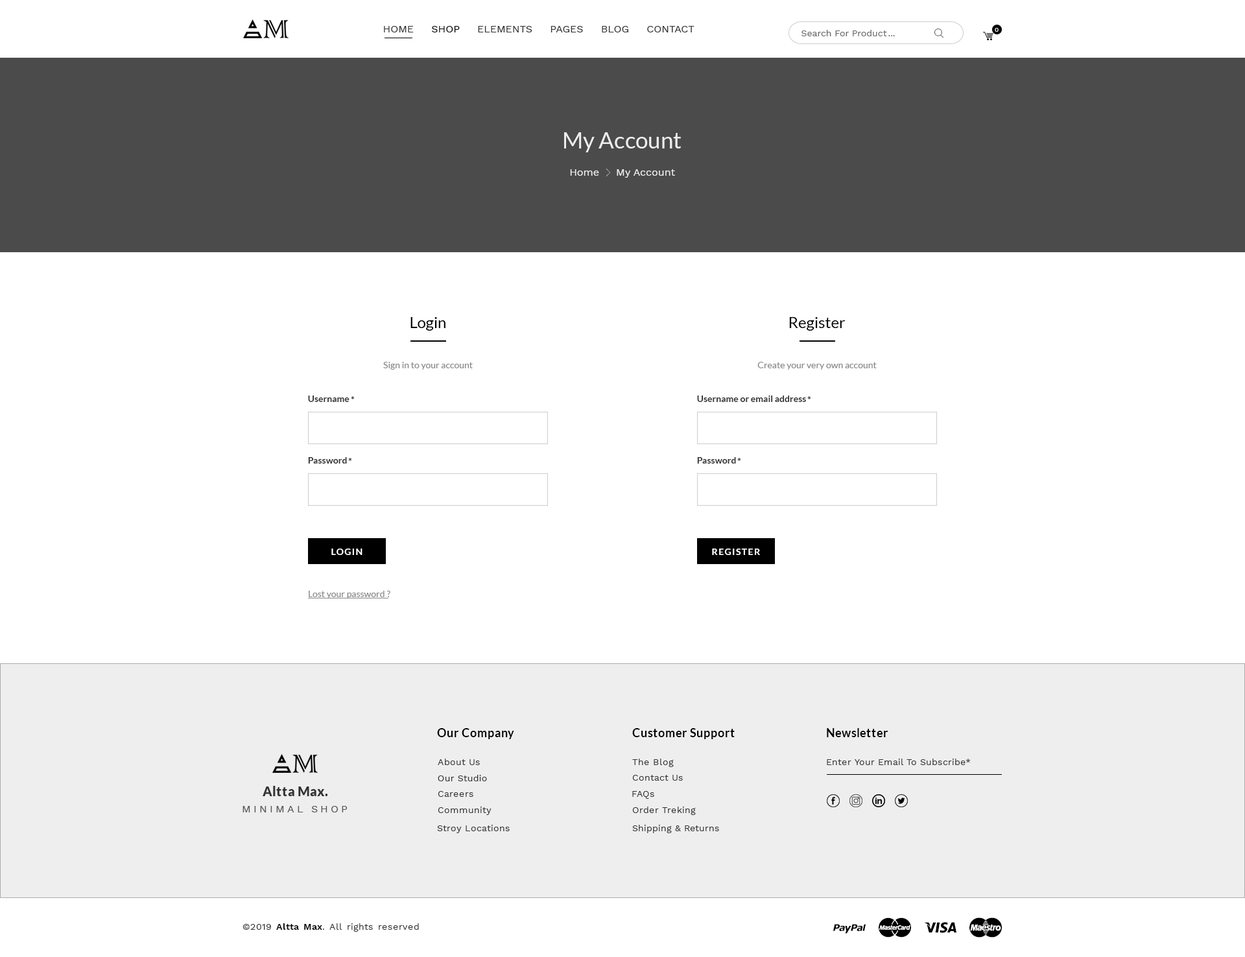
<style>
.page{position:relative;width:1245px;height:957px;background:#ffffff}
.page>*{position:absolute;margin:0}
.t1{font:10.4px "WorkSans-Regular";color:#333333}
.t2{font:10.4px "WorkSans-Regular";color:#000000}
.t3{font:9.1px "WorkSans-Regular";color:#666666}
.t4{font:6.5px "WorkSans-Regular";color:#ffffff}
.t5{font:22.7px "Lato-Regular";color:#eeeeee}
.t6{font:10.4px "WorkSans-Regular";color:#eeeeee}
.t7{font:15.6px "Lato-Regular";color:#000000}
.t8{font:9.1px "Lato-Regular";color:#888888}
.t9{font:9.1px "Lato-Bold";color:#333333}
.t10{font:9.1px "Lato-Bold";letter-spacing:0.1em;color:#ffffff}
.t11{font:11.7px "Lato-Bold";letter-spacing:0.03em;color:#000000}
.t12{font:9.1px "WorkSans-Regular";letter-spacing:0.03em;color:#333333}
.t13{font:13px "Lato-Black";letter-spacing:0.03em;color:#333333}
.t14{font:10.4px "WorkSans-Regular";letter-spacing:0.25em;color:#555555}
.t15{font:9.1px "WorkSans-SemiBold";letter-spacing:0.03em;color:#000000}
</style>
<div class="page">
<p class="t1" style="left:384px;top:26px;width:311px;height:6px">HOME     <span class="t2">SHOP</span>     ELEMENTS     PAGES     BLOG     CONTACT</p>
<p class="t3" style="left:802px;top:30px;width:85px;height:6px">Search For Product</p>
<p class="t4" style="left:995px;top:28px;width:4px;height:4px">0</p>
<p class="t3" style="left:889px;top:35px;width:6px;height:1px">...</p>
<p class="t5" style="left:564px;top:132px;width:118px;height:20px">My Account</p>
<p class="t6" style="left:570px;top:169px;width:29px;height:7px">Home</p>
<p class="t6" style="left:617px;top:169px;width:58px;height:9px">My Account</p>
<p class="t7" style="left:411px;top:317px;width:35px;height:14px">Login</p>
<p class="t7" style="left:789px;top:317px;width:57px;height:14px">Register</p>
<p class="t8" style="left:383px;top:362px;width:90px;height:8px">Sign in to your account</p>
<p class="t8" style="left:758px;top:362px;width:119px;height:8px">Create your very own account</p>
<p class="t9" style="left:308px;top:396px;width:42px;height:6px">Username</p>
<p class="t9" style="left:351px;top:396px;width:3px;height:4px">*</p>
<p class="t9" style="left:697px;top:396px;width:109px;height:6px">Username or email address</p>
<p class="t9" style="left:808px;top:396px;width:3px;height:4px">*</p>
<p class="t9" style="left:308px;top:457px;width:39px;height:7px">Password</p>
<p class="t9" style="left:348px;top:458px;width:4px;height:3px">*</p>
<p class="t9" style="left:697px;top:457px;width:39px;height:7px">Password</p>
<p class="t9" style="left:738px;top:458px;width:3px;height:3px">*</p>
<p class="t10" style="left:331px;top:549px;width:32px;height:6px">LOGIN</p>
<p class="t10" style="left:712px;top:549px;width:48px;height:6px">REGISTER</p>
<p class="t8" style="left:309px;top:591px;width:76px;height:8px">Lost your password</p>
<p class="t8" style="left:387px;top:591px;width:3px;height:6px">?</p>
<p class="t11" style="left:437px;top:728px;width:77px;height:11px">Our Company</p>
<p class="t11" style="left:632px;top:728px;width:103px;height:11px">Customer Support</p>
<p class="t11" style="left:827px;top:728px;width:61px;height:10px">Newsletter</p>
<p class="t12" style="left:438px;top:759px;width:42px;height:6px">About Us</p>
<p class="t12" style="left:632px;top:759px;width:42px;height:8px">The Blog</p>
<p class="t12" style="left:827px;top:759px;width:144px;height:6px">Enter Your Email To Subscribe*</p>
<p class="t12" style="left:438px;top:775px;width:49px;height:7px">Our Studio</p>
<p class="t12" style="left:632px;top:775px;width:51px;height:6px">Contact Us</p>
<p class="t13" style="left:263px;top:786px;width:65px;height:11px">Altta Max.</p>
<p class="t12" style="left:438px;top:791px;width:36px;height:6px">Careers</p>
<p class="t12" style="left:632px;top:791px;width:23px;height:8px">FAQs</p>
<p class="t14" style="left:243px;top:806px;width:105px;height:7px">MINIMAL SHOP</p>
<p class="t12" style="left:438px;top:807px;width:54px;height:8px">Community</p>
<p class="t12" style="left:632px;top:807px;width:64px;height:8px">Order Treking</p>
<p class="t12" style="left:437px;top:825px;width:73px;height:9px">Stroy Locations</p>
<p class="t12" style="left:632px;top:825px;width:87px;height:9px">Shipping &amp; Returns</p>
<p class="t12" style="left:243px;top:924px;width:176px;height:8px">©2019 <span class="t15">Altta Max</span>. All rights reserved</p>
</div>
